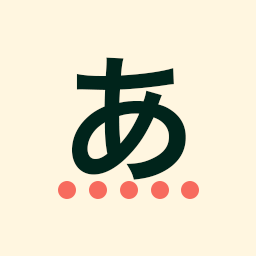
<style>
.page{position:relative;width:256px;height:256px;background:#fff6e0}
.page>*{position:absolute;margin:0}
.t1{font:138.6px "HiraKakuProN-W6";color:#00241b}
</style>
<div class="page">
<p class="t1" style="left:71px;top:57px;width:115px;height:123px">あ</p>
</div>
